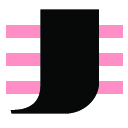
<style>
.page{position:relative;width:128px;height:128px;background:#ffffff}
.page>*{position:absolute;margin:0}
.t1{font:134.1px "Braggadocio";color:#070a0a}
</style>
<div class="page">
<p class="t1" style="left:10px;top:9px;width:89px;height:105px">J</p>
</div>
